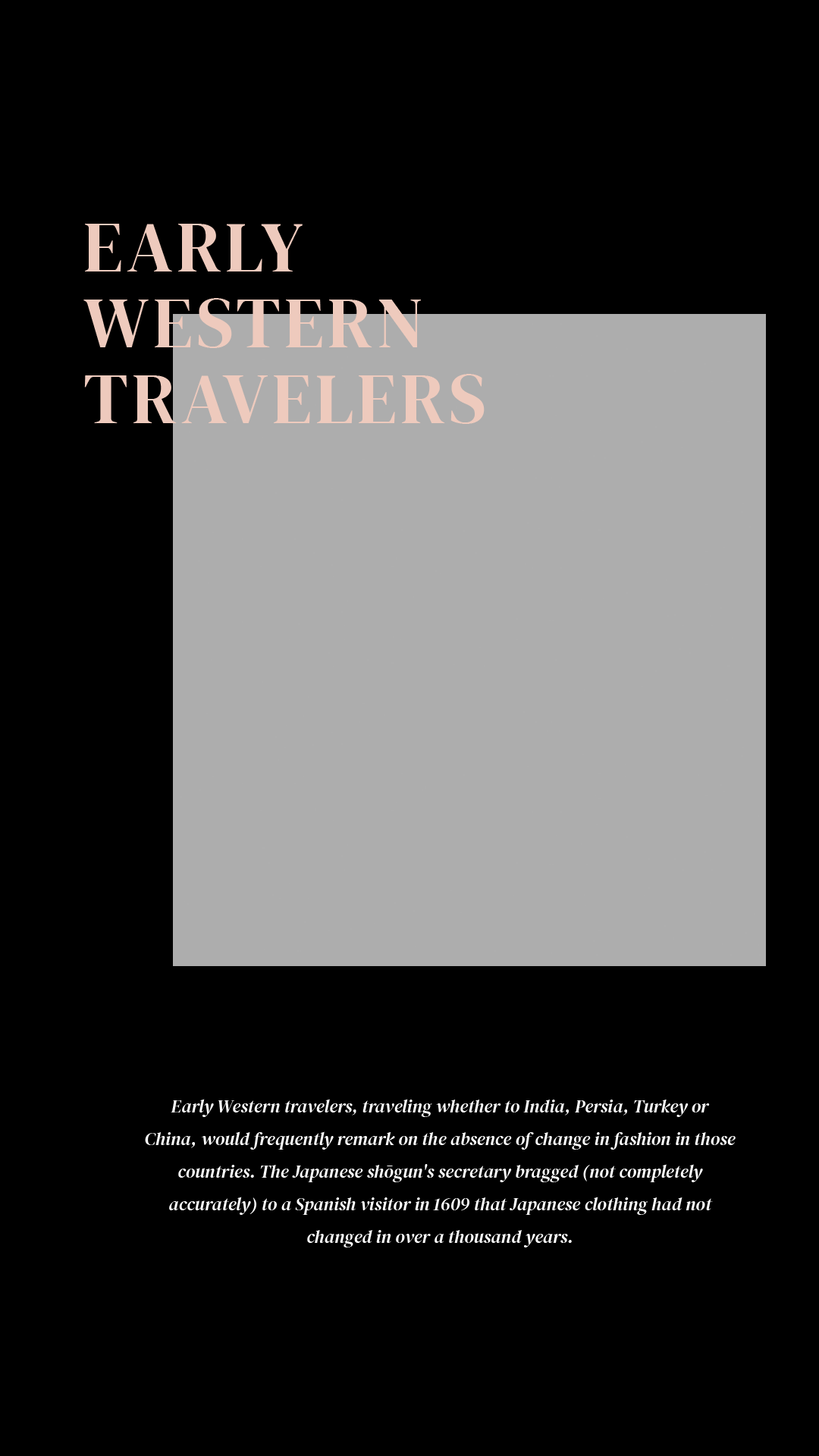
<style>
.page{position:relative;width:819px;height:1456px;background:#000000}
.page>*{position:absolute;margin:0}
.t1{font:71.3px/75.8px "DMSerifDisplay-Regular";letter-spacing:0.053em;color:#eecabd;text-transform:uppercase}
.t2{font:18.2px/32.6px "DMSerifDisplay-Italic";color:#ffffff}
</style>
<div class="page">
<p class="t1" style="left:83px;top:224px;width:402px;height:200px">Early<br>Western<br>travelers</p>
<p class="t2" style="left:145px;top:1099px;width:591px;height:148px;text-align:center">Early Western travelers, traveling whether to India, Persia, Turkey or China, would frequently remark on the absence of change in fashion in those countries. The Japanese shōgun's secretary bragged (not completely accurately) to a Spanish visitor in 1609 that Japanese clothing had not changed in over a thousand years.</p>
</div>
